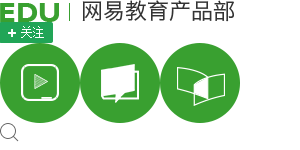
<style>
.page{position:relative;width:300px;height:150px;background:#ffffff}
.page>*{position:absolute;margin:0}
.t1{font:28px "GillSansMT-Bold";color:#39a030}
.t2{font:22px "HiraginoSansGB-W3";color:#333333}
.t3{font:12px "SimSun";color:#ffffff}
</style>
<div class="page">
<p class="t1" style="left:0px;top:3px;width:59px;height:19px">EDU</p>
<p class="t2" style="left:82px;top:0px;width:152px;height:22px">网易教育产品部</p>
<p class="t3" style="left:21px;top:26px;width:23px;height:12px">关注</p>
</div>
